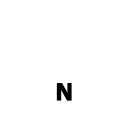
<style>
.page{position:relative;width:128px;height:128px;background:#ffffff}
.page>*{position:absolute;margin:0}
.t1{font:25px "MyriadPro-Bold";letter-spacing:-0.05em;color:#000000;font-weight:bold}
</style>
<div class="page">
<p class="t1" style="left:56px;top:83px;width:16px;height:18px">N</p>
</div>
